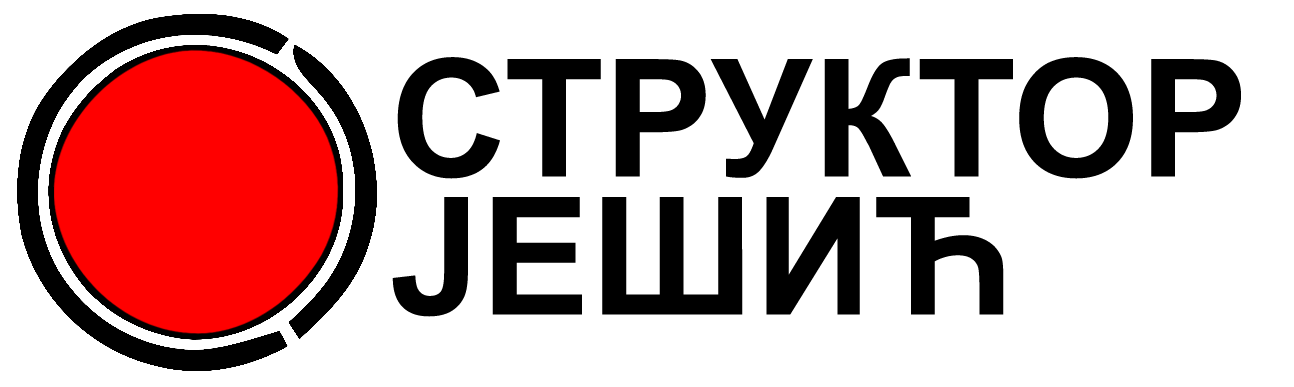
<style>
.page{position:relative;width:1294px;height:387px;background:#ffffff}
.page>*{position:absolute;margin:0}
.t1{font:163.5px "Arial-BoldMT";color:#000000}
</style>
<div class="page">
<p class="t1" style="left:397px;top:57px;width:844px;height:122px">СТРУКТОР</p>
<p class="t1" style="left:392px;top:197px;width:612px;height:120px">ЈЕШИЋ</p>
</div>
